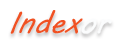
<style>
.page{position:relative;width:124px;height:50px;background:#ffffff}
.page>*{position:absolute;margin:0}
.t1{font:30px "MVBoli";color:#f05123;font-style:italic}
.t2{font:30px "MVBoli";color:#fbfcfd;font-style:italic}
</style>
<div class="page">
<p class="t1" style="left:10px;top:10px;width:102px;height:24px">Index<span class="t2">or</span></p>
</div>
